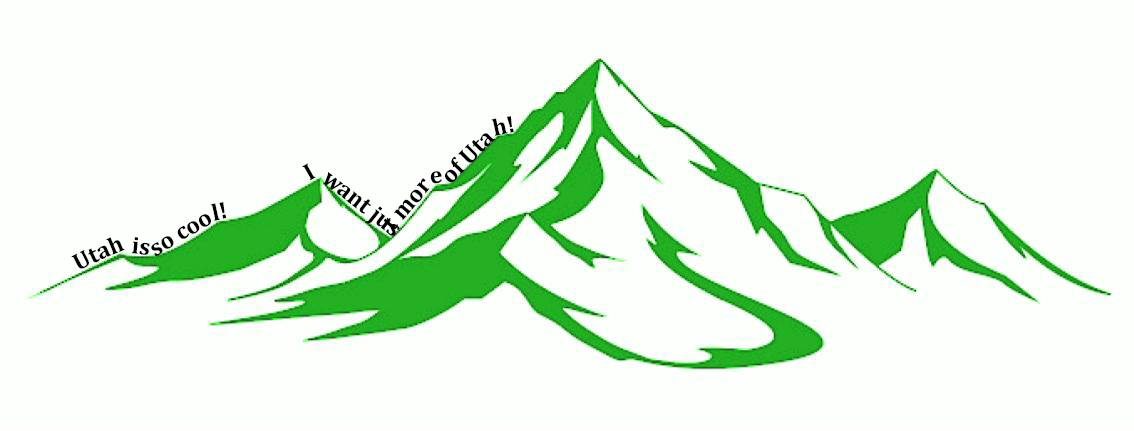
<style>
.page{position:relative;width:1134px;height:431px;background:#fdfffc}
.page>*{position:absolute;margin:0}
.t1{font:24px "Cambria-Bold";color:#000000}
</style>
<div class="page">
<p class="t1" style="left:302px;top:116px;width:212px;height:120px;text-align:center">I want just more of Utah!</p>
<p class="t1" style="left:71px;top:202px;width:156px;height:67px;text-align:center">Utah is so cool!</p>
</div>
